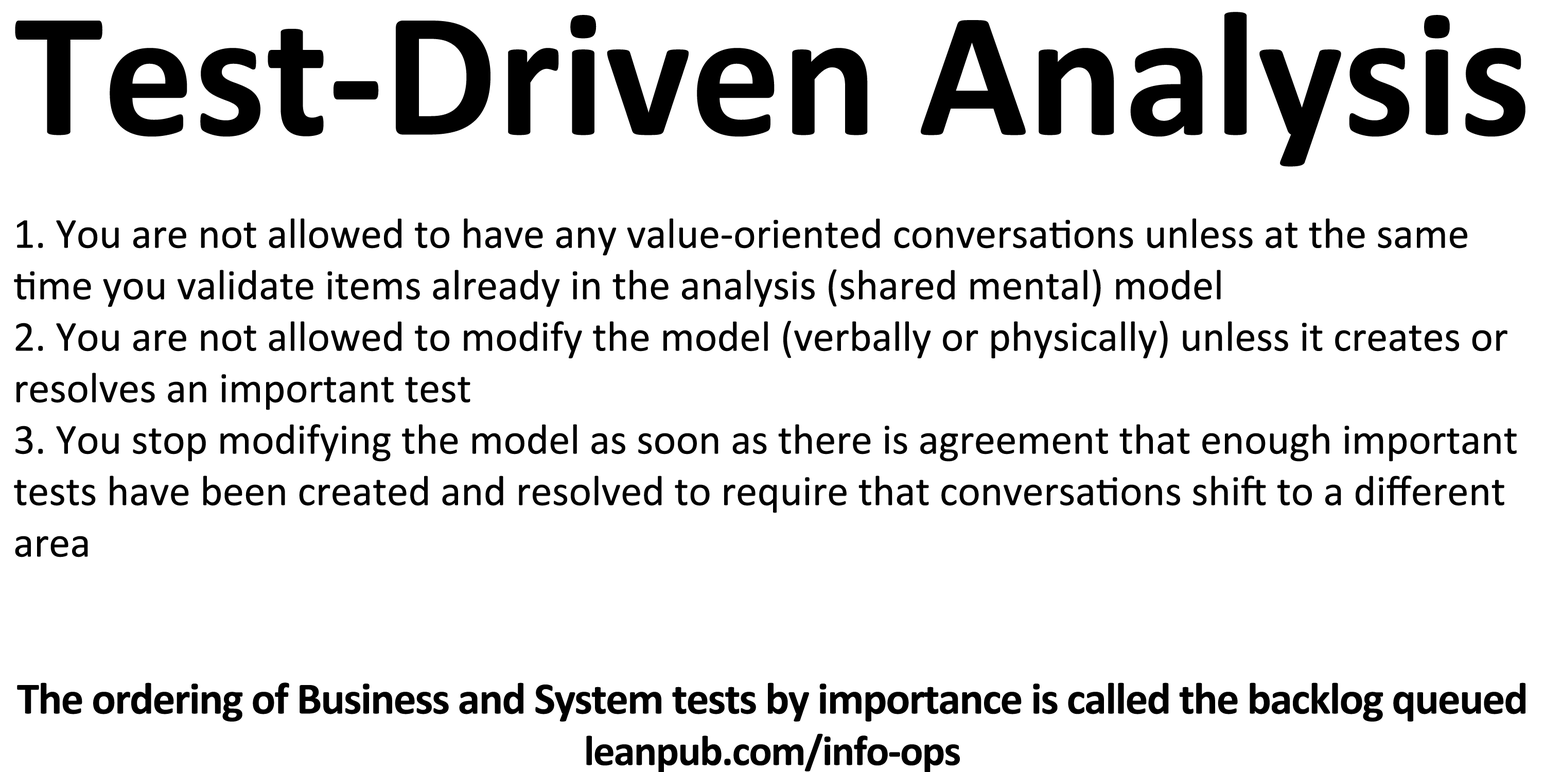
<style>
.page{position:relative;width:1544px;height:772px;background:#ffffff}
.page>*{position:absolute;margin:0}
.t1{font:42.9px "Calibri";color:#000000}
.t2{font:180.2px "Calibri-Bold";color:#000000}
.t3{font:45px "Calibri-Bold";letter-spacing:-0.025em;color:#000000}
.t4{font:42.9px "Calibri-Bold";letter-spacing:-0.025em;color:#000000}
</style>
<div class="page">
<p class="t1" style="left:14px;top:12px;width:1512px;height:761px;text-align:center"><span class="t2">Test-Driven Analysis<br><br></span>1. You are not allowed to have any value-oriented conversations unless at the same time you validate items already in the analysis (shared mental) model<br>2. You are not allowed to modify the model (verbally or physically) unless it creates or resolves an important test<br>3. You stop modifying the model as soon as there is agreement that enough important tests have been created and resolved to require that conversations shift to a different area<br><br><br><span class="t3">The ordering of Business and System tests by importance is called the backlog queued<br></span><span class="t4">leanpub.com/info-ops</span></p>
</div>
